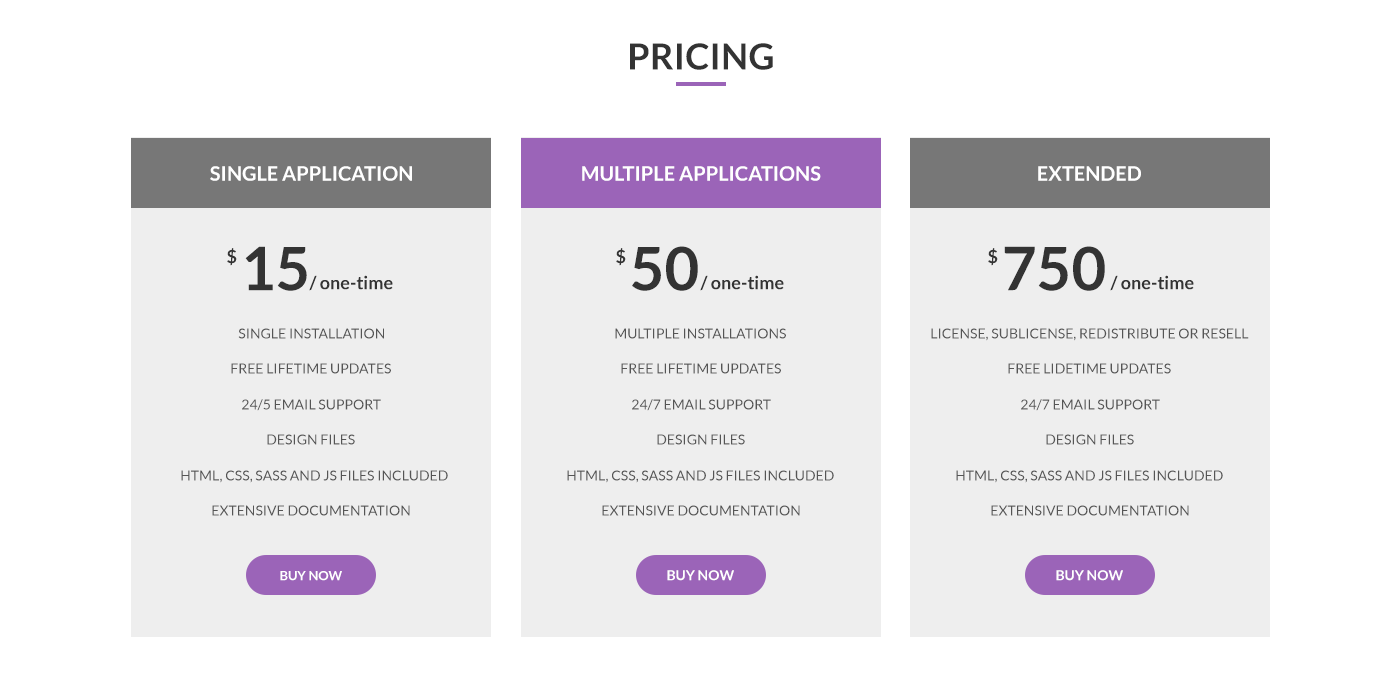
<style>
.page{position:relative;width:1400px;height:680px;background:#ffffff}
.page>*{position:absolute;margin:0}
.t1{font:36px "Lato-Bold";letter-spacing:0.005em;color:#333333}
.t2{font:20px "Lato-Bold";color:#ffffff}
.t3{font:60px "Lato-Bold";color:#333333}
.t4{font:18px "Lato-Bold";color:#333333}
.t5{font:14px "Lato-Regular";color:#555555}
.t6{font:13px "Lato-Bold";color:#ffffff}
.t7{font:14px "Lato-Bold";color:#ffffff}
</style>
<div class="page">
<p class="t1" style="left:630px;top:43px;width:143px;height:27px">PRICING</p>
<p class="t2" style="left:210px;top:166px;width:202px;height:15px">SINGLE APPLICATION</p>
<p class="t2" style="left:582px;top:166px;width:239px;height:15px">MULTIPLE APPLICATIONS</p>
<p class="t2" style="left:1038px;top:166px;width:103px;height:15px">EXTENDED</p>
<p class="t3" style="left:245px;top:246px;width:62px;height:45px">15</p>
<p class="t3" style="left:632px;top:246px;width:66px;height:45px">50</p>
<p class="t3" style="left:1004px;top:246px;width:101px;height:45px">750</p>
<p class="t4" style="left:227px;top:248px;width:10px;height:18px">$</p>
<p class="t4" style="left:616px;top:248px;width:10px;height:18px">$</p>
<p class="t4" style="left:988px;top:248px;width:10px;height:18px">$</p>
<p class="t4" style="left:309px;top:275px;width:84px;height:16px">/ one-time</p>
<p class="t4" style="left:700px;top:275px;width:84px;height:16px">/ one-time</p>
<p class="t4" style="left:1110px;top:275px;width:84px;height:16px">/ one-time</p>
<p class="t5" style="left:238px;top:328px;width:146px;height:11px">SINGLE INSTALLATION</p>
<p class="t5" style="left:615px;top:328px;width:171px;height:11px">MULTIPLE INSTALLATIONS</p>
<p class="t5" style="left:931px;top:328px;width:318px;height:13px">LICENSE, SUBLICENSE, REDISTRIBUTE OR RESELL</p>
<p class="t5" style="left:231px;top:363px;width:160px;height:11px">FREE LIFETIME UPDATES</p>
<p class="t5" style="left:621px;top:363px;width:160px;height:11px">FREE LIFETIME UPDATES</p>
<p class="t5" style="left:1008px;top:363px;width:163px;height:11px">FREE LIDETIME UPDATES</p>
<p class="t5" style="left:242px;top:399px;width:139px;height:12px">24/5 EMAIL SUPPORT</p>
<p class="t5" style="left:632px;top:399px;width:139px;height:12px">24/7 EMAIL SUPPORT</p>
<p class="t5" style="left:1021px;top:399px;width:139px;height:12px">24/7 EMAIL SUPPORT</p>
<p class="t5" style="left:267px;top:434px;width:88px;height:11px">DESIGN FILES</p>
<p class="t5" style="left:657px;top:434px;width:88px;height:11px">DESIGN FILES</p>
<p class="t5" style="left:1046px;top:434px;width:88px;height:11px">DESIGN FILES</p>
<p class="t5" style="left:181px;top:470px;width:267px;height:13px">HTML, CSS, SASS AND JS FILES INCLUDED</p>
<p class="t5" style="left:567px;top:470px;width:267px;height:13px">HTML, CSS, SASS AND JS FILES INCLUDED</p>
<p class="t5" style="left:956px;top:470px;width:267px;height:13px">HTML, CSS, SASS AND JS FILES INCLUDED</p>
<p class="t5" style="left:212px;top:505px;width:198px;height:11px">EXTENSIVE DOCUMENTATION</p>
<p class="t5" style="left:602px;top:505px;width:198px;height:11px">EXTENSIVE DOCUMENTATION</p>
<p class="t5" style="left:991px;top:505px;width:198px;height:11px">EXTENSIVE DOCUMENTATION</p>
<p class="t6" style="left:280px;top:571px;width:62px;height:10px">BUY NOW</p>
<p class="t7" style="left:667px;top:570px;width:67px;height:11px">BUY NOW</p>
<p class="t7" style="left:1056px;top:570px;width:67px;height:11px">BUY NOW</p>
</div>
